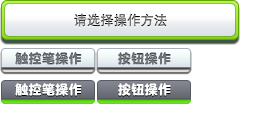
<style>
.page{position:relative;width:256px;height:128px;background:#ffffff}
.page>*{position:absolute;margin:0}
.t1{font:13.3px "DFPHeiW5-GB"}
.t2{font:13.3px "DFPYuanW9";color:#6e737b}
.t3{font:13.3px "DFPYuanW9";color:#ffffff}
</style>
<div class="page">
<p class="t1" style="left:74px;top:13px;width:93px;height:14px">请选择操作方法</p>
<p class="t2" style="left:15px;top:52px;width:67px;height:13px">触控笔操作</p>
<p class="t2" style="left:118px;top:52px;width:53px;height:13px">按钮操作</p>
<p class="t3" style="left:15px;top:83px;width:67px;height:13px">触控笔操作</p>
<p class="t3" style="left:118px;top:83px;width:53px;height:13px">按钮操作</p>
</div>
